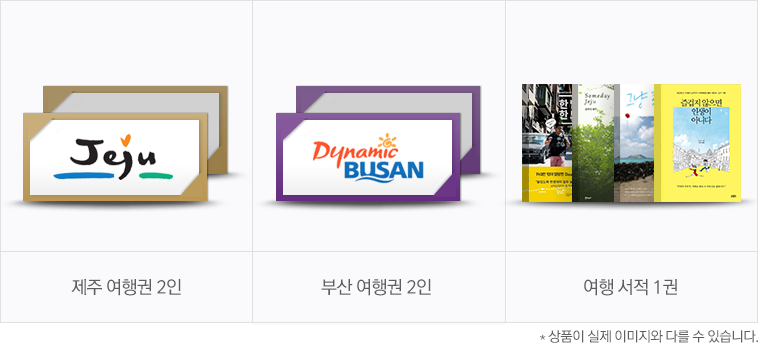
<style>
.page{position:relative;width:758px;height:345px;background:#fafafc}
.page>*{position:absolute;margin:0}
.t1{font:18px "RixGoM";letter-spacing:-0.045em;color:#5e5e5e}
.t2{font:14px "RixGoM";letter-spacing:-0.045em;color:#5e5e5e}
</style>
<div class="page">
<p class="t1" style="left:71px;top:279px;width:110px;height:17px">제주 여행권 2인</p>
<p class="t1" style="left:321px;top:279px;width:110px;height:17px">부산 여행권 2인</p>
<p class="t1" style="left:584px;top:279px;width:93px;height:17px">여행 서적 1권</p>
<p class="t2" style="left:540px;top:330px;width:218px;height:13px">* 상품이 실제 이미지와 다를 수 있습니다.</p>
</div>
